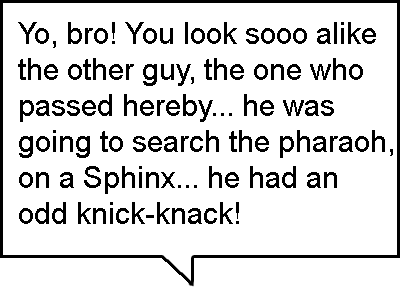
<style>
.page{position:relative;width:400px;height:300px;background:#ffffff}
.page>*{position:absolute;margin:0}
.t1{font:30px "ArialMT";color:#000000}
</style>
<div class="page">
<p class="t1" style="left:18px;top:22px;width:375px;height:202px">Yo, bro! You look sooo alike <br>the other guy, the one who <br>passed hereby... he was <br>going to search the pharaoh,<br>on a Sphinx... he had an <br>odd knick-knack!</p>
</div>
